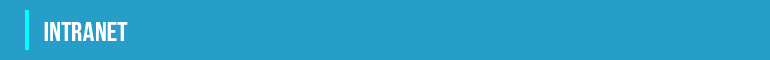
<style>
.page{position:relative;width:770px;height:60px;background:#269ec9}
.page>*{position:absolute;margin:0}
.t1{font:27px "BebasNeue";color:#ffffff;scale:1.06 1}
</style>
<div class="page">
<p class="t1" style="left:44px;top:22px;width:84px;height:19px">INTRANET</p>
</div>
